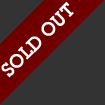
<style>
.page{position:relative;width:105px;height:105px;background:#333333}
.page>*{position:absolute;margin:0}
.t1{font:20px "LubalinGraphITC-Demi";color:#ffffff}
</style>
<div class="page">
<p class="t1" style="left:1px;top:1px;width:73px;height:77px;rotate:-45deg">SOLD OUT</p>
</div>
